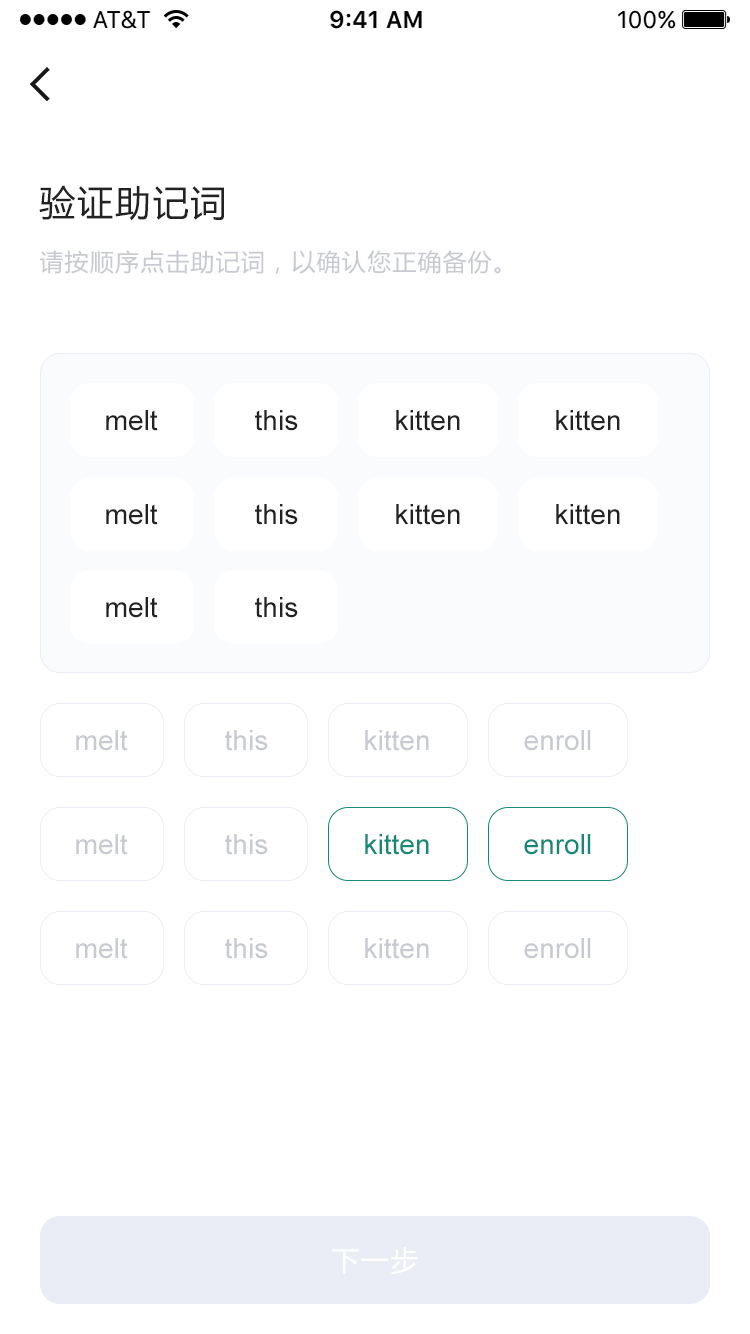
<style>
.page{position:relative;width:750px;height:1334px;background:#ffffff}
.page>*{position:absolute;margin:0}
.t1{font:36px "MicrosoftYaHei";letter-spacing:0.05em;color:#222222}
.t2{font:24px "MicrosoftYaHei";letter-spacing:0.05em;color:#c8cad2}
.t3{font:28px "ArialMT";color:#222222}
.t4{font:28px "ArialMT";color:#c8cad2}
.t5{font:28px "ArialMT";color:#158878}
.t6{font:28px "MicrosoftYaHei";letter-spacing:0.05em;color:#ffffff}
</style>
<div class="page">
<p class="t1" style="left:39px;top:185px;width:185px;height:36px">验证助记词</p>
<p class="t2" style="left:40px;top:250px;width:461px;height:24px">请按顺序点击助记词，以确认您正确备份。</p>
<p class="t3" style="left:106px;top:410px;width:52px;height:21px">melt</p>
<p class="t3" style="left:255px;top:410px;width:43px;height:21px">this</p>
<p class="t3" style="left:396px;top:410px;width:64px;height:21px">kitten</p>
<p class="t3" style="left:556px;top:410px;width:64px;height:21px">kitten</p>
<p class="t3" style="left:106px;top:504px;width:52px;height:21px">melt</p>
<p class="t3" style="left:255px;top:504px;width:43px;height:21px">this</p>
<p class="t3" style="left:396px;top:504px;width:64px;height:21px">kitten</p>
<p class="t3" style="left:556px;top:504px;width:64px;height:21px">kitten</p>
<p class="t3" style="left:106px;top:597px;width:52px;height:21px">melt</p>
<p class="t3" style="left:255px;top:597px;width:43px;height:21px">this</p>
<p class="t4" style="left:76px;top:730px;width:52px;height:21px">melt</p>
<p class="t4" style="left:225px;top:730px;width:43px;height:21px">this</p>
<p class="t4" style="left:365px;top:730px;width:64px;height:21px">kitten</p>
<p class="t4" style="left:524px;top:730px;width:67px;height:21px">enroll</p>
<p class="t4" style="left:76px;top:834px;width:52px;height:21px">melt</p>
<p class="t4" style="left:225px;top:834px;width:43px;height:21px">this</p>
<p class="t5" style="left:365px;top:834px;width:64px;height:21px">kitten</p>
<p class="t5" style="left:524px;top:834px;width:67px;height:21px">enroll</p>
<p class="t4" style="left:76px;top:938px;width:52px;height:21px">melt</p>
<p class="t4" style="left:225px;top:938px;width:43px;height:21px">this</p>
<p class="t4" style="left:365px;top:938px;width:64px;height:21px">kitten</p>
<p class="t4" style="left:524px;top:938px;width:67px;height:21px">enroll</p>
<p class="t6" style="left:332px;top:1247px;width:86px;height:28px">下一步</p>
</div>
